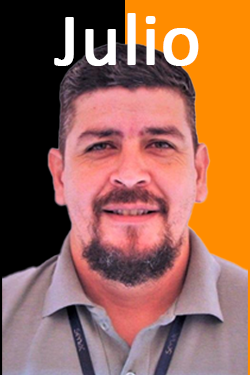
<style>
.page{position:relative;width:250px;height:375px}
.page>*{position:absolute;margin:0}
.t1{font:75px "Calibri";color:#ffffff;font-weight:bold}
</style>
<div class="page">
<p class="t1" style="left:54px;top:13px;width:145px;height:53px">Julio</p>
</div>
